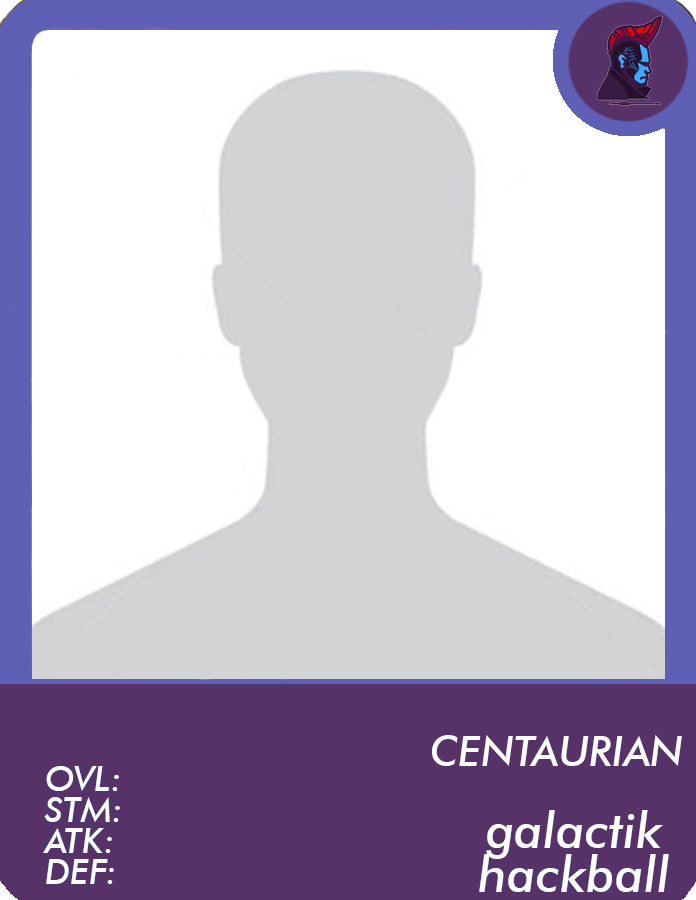
<style>
.page{position:relative;width:696px;height:900px;background:#ffffff}
.page>*{position:absolute;margin:0}
.t1{font:42px "FuturaBT-MediumItalic";color:#ffffff}
.t2{font:35px/31px "FuturaBT-MediumItalic";color:#ffffff}
.t3{font:50.3px/44.7px "FuturaBT-MediumItalic";color:#ffffff}
</style>
<div class="page">
<p class="t1" style="left:432px;top:735px;width:250px;height:31px">CENTAURIAN</p>
<p class="t2" style="left:43px;top:766px;width:77px;height:118px">OVL:<br>STM:<br>ATK:<br>DEF:</p>
<p class="t3" style="left:479px;top:810px;width:190px;height:82px;text-align:center">galactik<br>hackball</p>
</div>
